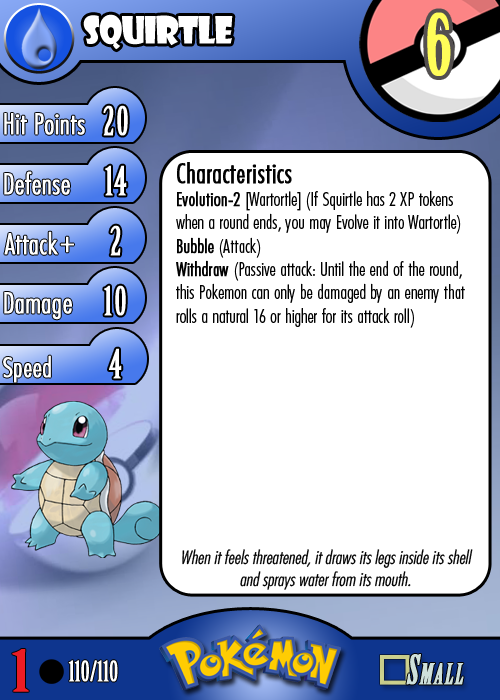
<style>
.page{position:relative;width:500px;height:700px;background:#ffffff}
.page>*{position:absolute;margin:0}
.t1{font:36.7px "ShowcardGothic-Reg";letter-spacing:-0.025em;color:#ffffff;scale:0.91 1}
.t2{font:83.3px "BirchStd";letter-spacing:0.025em;color:#fffd59;font-weight:bold}
.t3{font:27.8px "Futura-CondensedLight";color:#ffffff;font-weight:bold}
.t4{font:38.9px "BirchStd";letter-spacing:0.035em;color:#ffffff;font-weight:bold}
.t5{font:19.4px "FuturaCondensedBQ-Light";color:#010101}
.t6{font:27.8px "FuturaCondensedBQ-Light";color:#010101;font-weight:bold}
.t7{font:19.4px "FuturaCondensedBQ-Light";color:#010101;font-weight:bold}
.t8{font:30.6px "Futura-CondensedLight";color:#ffffff;font-weight:bold}
.t9{font:27.8px "FuturaCondensedBQ-Light";color:#ffffff;font-weight:bold}
.t10{font:18.1px "Futura-CondensedLight";color:#010101;font-style:italic}
.t11{font:55.6px "BirchStd";color:#ed1c24;font-weight:bold;scale:1.5 1}
.t12{font:27.8px "BirchStd";color:#ffffff;font-weight:bold}
</style>
<div class="page">
<p class="t1" style="left:83px;top:14px;width:150px;height:36px">squirtle</p>
<p class="t2" style="left:427px;top:12px;width:24px;height:64px">6</p>
<p class="t3" style="left:4px;top:113px;width:81px;height:22px">Hit Points</p>
<p class="t4" style="left:103px;top:105px;width:25px;height:31px">20</p>
<p class="t3" style="left:4px;top:171px;width:66px;height:24px">Defense</p>
<p class="t4" style="left:105px;top:165px;width:22px;height:31px">14</p>
<p class="t5" style="left:176px;top:162px;width:289px;height:166px"><span class="t6">Characteristics<br></span><span class="t7">Evolution-2 </span>[Wartortle] (If Squirtle has 2 XP tokens when a round ends, you may Evolve it into Wartortle)<br><span class="t7">Bubble</span> (Attack)<br><span class="t7">Withdraw</span> (Passive attack: Until the end of the round, this Pokemon can only be damaged by an enemy that rolls a natural 16 or higher for its attack roll)</p>
<p class="t3" style="left:4px;top:231px;width:54px;height:24px">Attack</p>
<p class="t4" style="left:110px;top:225px;width:11px;height:31px">2</p>
<p class="t8" style="left:60px;top:236px;width:14px;height:17px">+</p>
<p class="t3" style="left:4px;top:292px;width:68px;height:28px">Damage</p>
<p class="t4" style="left:104px;top:285px;width:22px;height:31px">10</p>
<p class="t4" style="left:109px;top:348px;width:13px;height:31px">4</p>
<p class="t9" style="left:3px;top:355px;width:48px;height:28px">Speed</p>
<p class="t10" style="left:182px;top:549px;width:291px;height:41px;text-align:center">When it feels threatened, it draws its legs inside its shell and sprays water from its mouth.</p>
<p class="t11" style="left:12px;top:649px;width:17px;height:43px">1</p>
<p class="t12" style="left:68px;top:660px;width:50px;height:22px">110/110</p>
</div>
